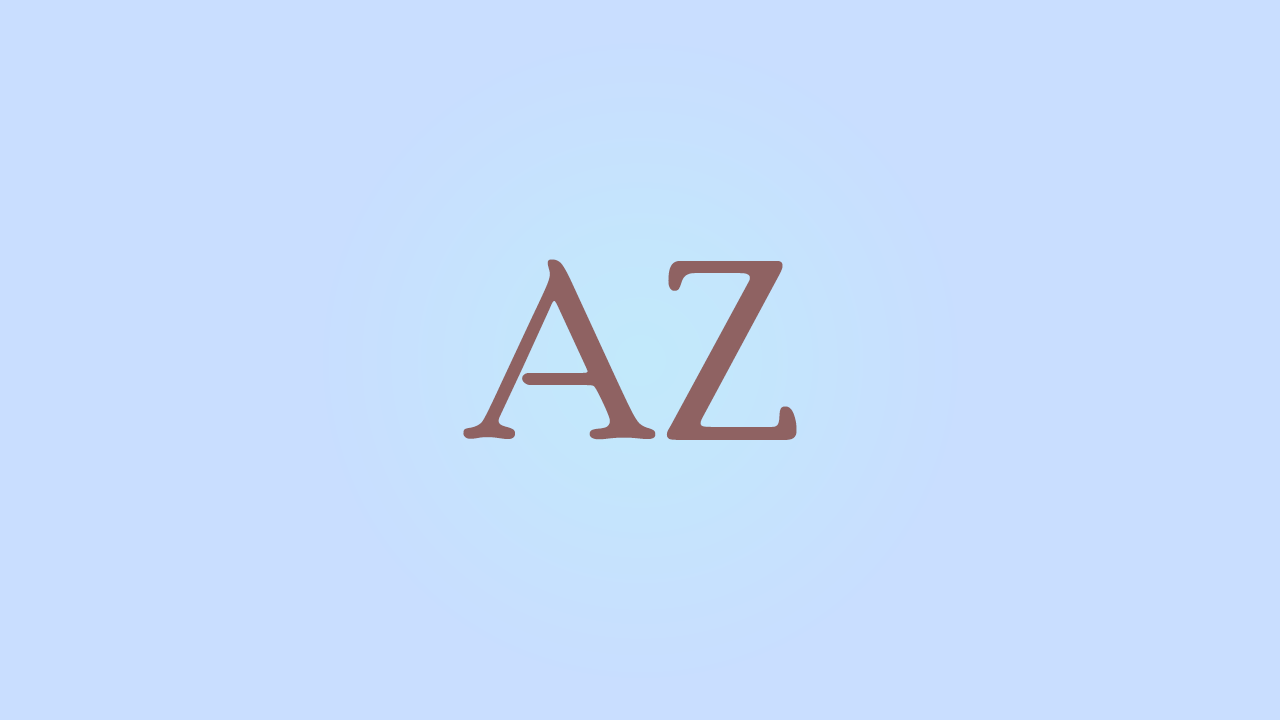
<style>
.page{position:relative;width:1280px;height:720px;background:#c9deff}
.page>*{position:absolute;margin:0}
.t1{font:247.7px "PoorRichard-Regular";letter-spacing:0.04em;color:#8f6262;text-transform:uppercase;scale:1.04 1}
</style>
<div class="page">
<p class="t1" style="left:463px;top:259px;width:334px;height:181px">AZ</p>
</div>
